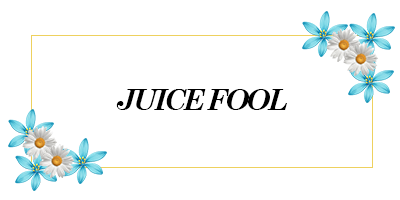
<style>
.page{position:relative;width:400px;height:200px;background:#ffffff}
.page>*{position:absolute;margin:0}
.t1{font:29.2px "CenturySchoolbook-BoldItalic";letter-spacing:-0.1em;color:#000000}
</style>
<div class="page">
<p class="t1" style="left:116px;top:89px;width:171px;height:21px">JUICE FOOL</p>
</div>
